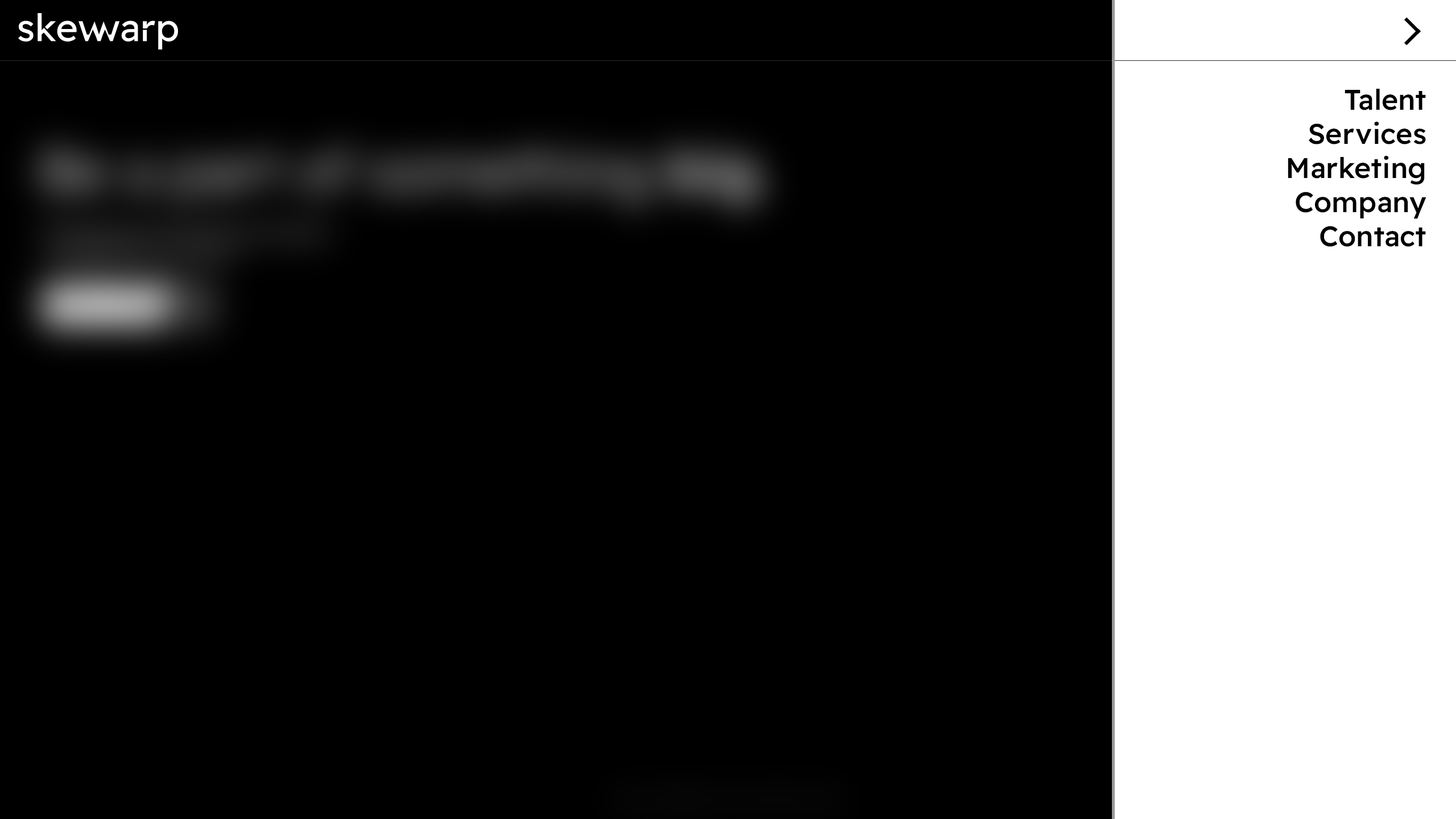
<style>
.page{position:relative;width:1456px;height:819px;background:#000000}
.page>*{position:absolute;margin:0}
.t1{font:28.4px "ReadexPro-Medium";color:#000000}
</style>
<div class="page">
<p class="t1" style="left:1288px;top:89px;width:138px;height:158px;text-align:right">Talent<br>Services<br>Marketing<br>Company<br>Contact</p>
</div>
